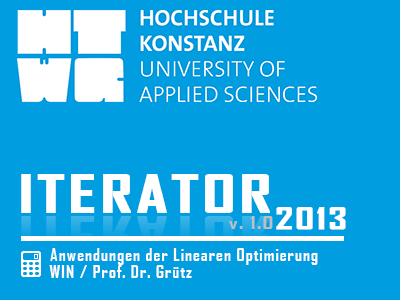
<style>
.page{position:relative;width:400px;height:300px;background:#009de0}
.page>*{position:absolute;margin:0}
.t1{font:50px "AgencyFB-Bold";letter-spacing:0.05em;color:#ffffff;text-transform:uppercase;font-weight:bold;scale:1.33 1}
.t2{font:50px "AgencyFB-Bold";letter-spacing:0.05em;color:#ffffff;font-weight:bold;scale:1.33 1}
.t3{font:30px "AgencyFB-Bold";letter-spacing:0.05em;color:#bebebe;scale:1.33 1}
.t4{font:30px "AgencyFB-Bold";letter-spacing:0.05em;color:#ffffff}
</style>
<div class="page">
<p class="t1" style="left:21px;top:174px;width:325px;height:56px">Iterator<span class="t2">2013</span></p>
<p class="t3" style="left:229px;top:216px;width:44px;height:13px">v. 1.0</p>
<p class="t4" style="left:50px;top:248px;width:268px;height:17px">Anwendungen der Linearen Optimierung</p>
<p class="t4" style="left:49px;top:265px;width:143px;height:13px">WIN / Prof. Dr. Grütz</p>
</div>
